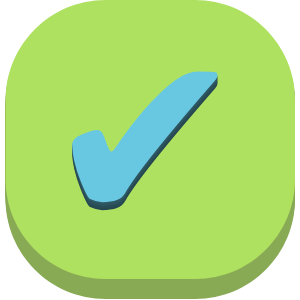
<style>
.page{position:relative;width:300px;height:300px;background:#afe160}
.page>*{position:absolute;margin:0}
.t1{font:240px "DejaVuSans";color:#69c8e1}
</style>
<div class="page">
<p class="t1" style="left:72px;top:71px;width:146px;height:132px">✔</p>
</div>
